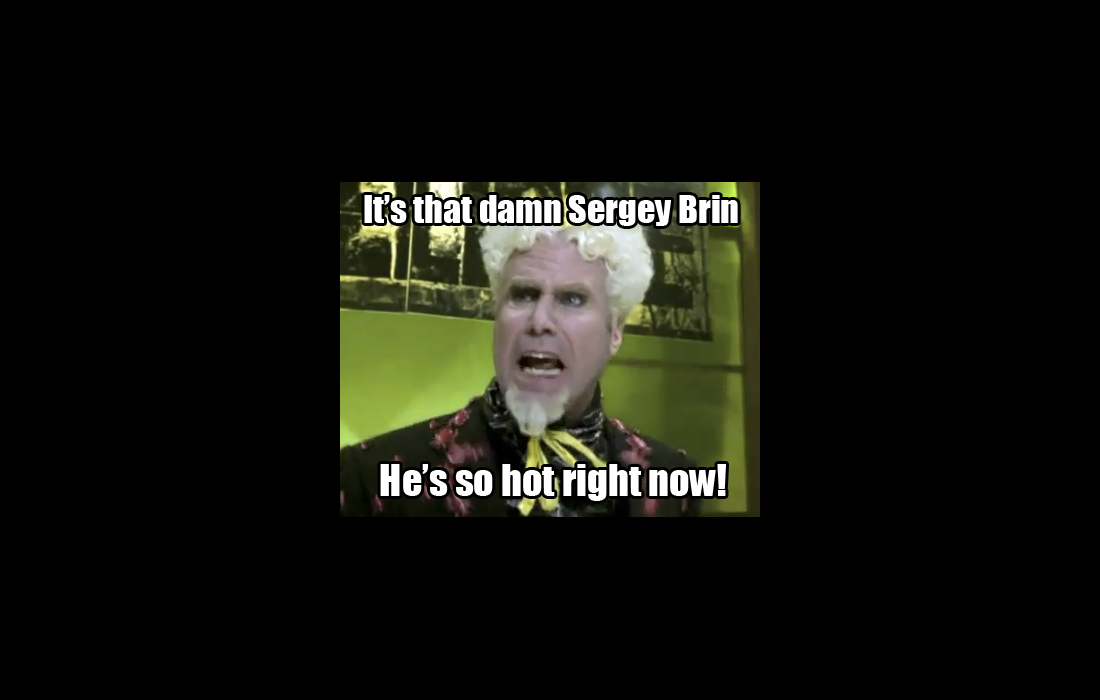
<style>
.page{position:relative;width:1100px;height:700px;background:#000000}
.page>*{position:absolute;margin:0}
.t1{font:36px "Impact";color:#ffffff}
.t2{font:40px "Impact";color:#ffffff}
</style>
<div class="page">
<p class="t1" style="left:364px;top:195px;width:374px;height:31px">It’s that damn Sergey Brin</p>
<p class="t2" style="left:380px;top:464px;width:347px;height:37px">He’s so hot right now!</p>
</div>
